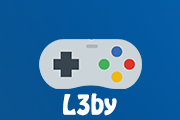
<style>
.page{position:relative;width:180px;height:120px}
.page>*{position:absolute;margin:0}
.t1{font:24px "HoboStd";color:#fefefe;font-weight:bold}
</style>
<div class="page">
<p class="t1" style="left:63px;top:93px;width:54px;height:23px">L3by</p>
</div>
